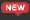
<style>
.page{position:relative;width:30px;height:20px;background:#333333}
.page>*{position:absolute;margin:0}
.t1{font:8.3px "JSArirangHON-Regular";letter-spacing:0.05em;color:#ffffff}
</style>
<div class="page">
<p class="t1" style="left:6px;top:4px;width:19px;height:7px">NEW</p>
</div>
